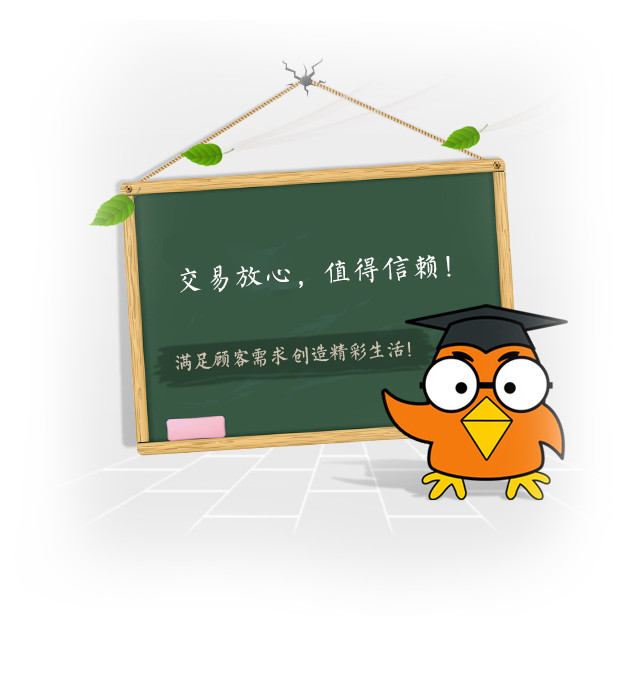
<style>
.page{position:relative;width:628px;height:687px;background:#ffffff}
.page>*{position:absolute;margin:0}
.t1{font:28.5px "FZSXSLKJW--GB1-0";letter-spacing:0.04em;color:#fffffe;text-transform:uppercase}
.t2{font:20.1px "FZSXSLKJW--GB1-0";letter-spacing:-0.06em;color:#d2c7b4;text-transform:uppercase}
</style>
<div class="page">
<p class="t1" style="left:180px;top:255px;width:271px;height:38px;rotate:-3deg">交易放心，值得信赖！</p>
<p class="t2" style="left:175px;top:340px;width:236px;height:31px;rotate:-3deg">满足顾客需求 创造精彩生活！</p>
</div>
